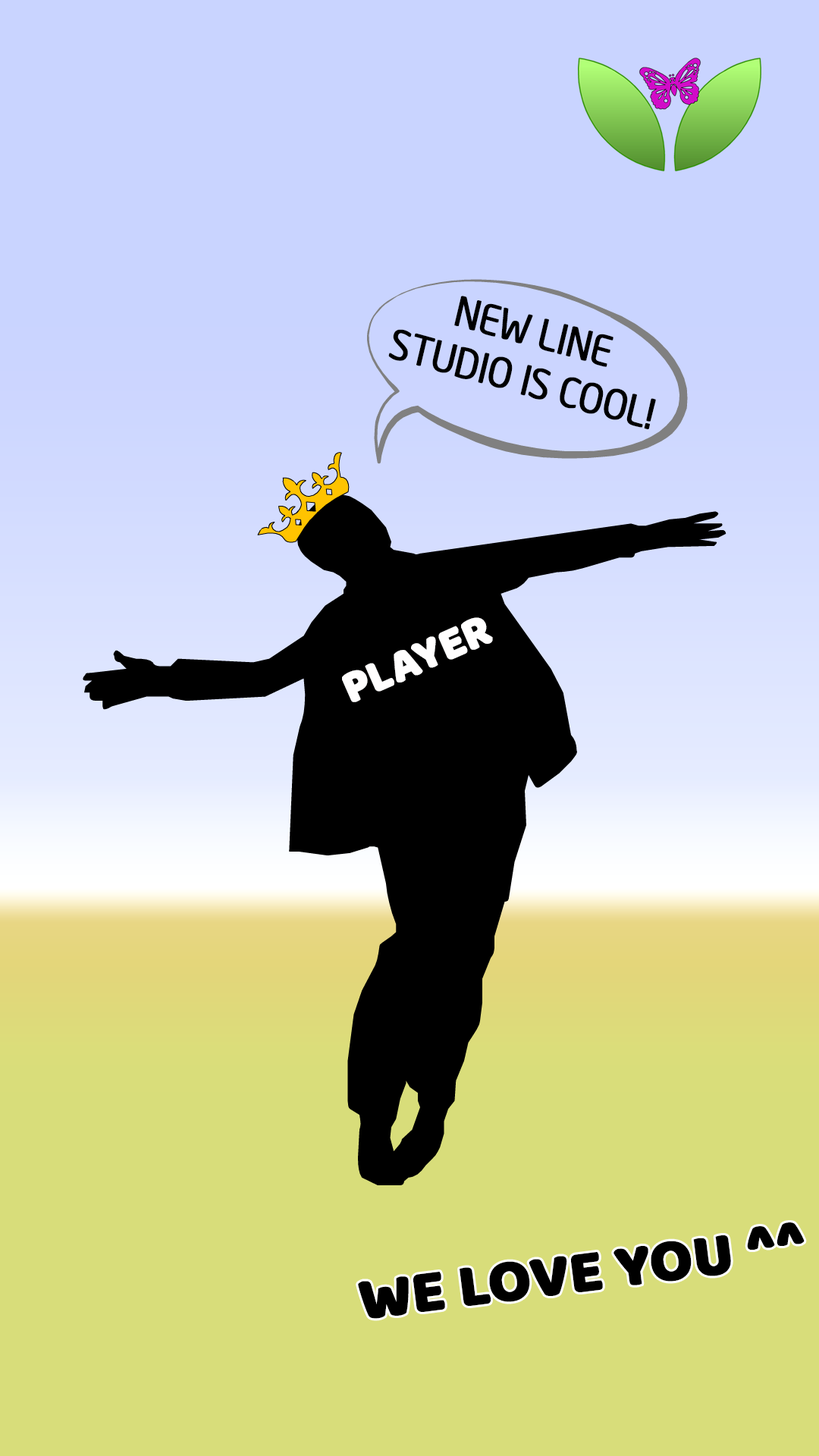
<style>
.page{position:relative;width:819px;height:1456px;background:#d8dd7a}
.page>*{position:absolute;margin:0}
.t1{font:40.7px "UTM-Neo-Sans-Intel";letter-spacing:-0.015em;color:#000000;text-transform:uppercase;font-weight:bold;scale:0.94 1}
.t2{font:45.5px "Baloo";letter-spacing:-0.015em;color:#fffefe;text-transform:uppercase;font-weight:bold}
.t3{font:60.7px "Baloo";letter-spacing:-0.015em;color:#000000;text-transform:uppercase;font-weight:bold}
</style>
<div class="page">
<p class="t1" style="left:388px;top:296px;width:268px;height:133px;rotate:15deg">new line studio is cool!</p>
<p class="t2" style="left:342px;top:617px;width:151px;height:85px;rotate:-24deg">player</p>
<p class="t3" style="left:358px;top:1222px;width:447px;height:97px;rotate:-7deg">we love you ^^</p>
</div>
